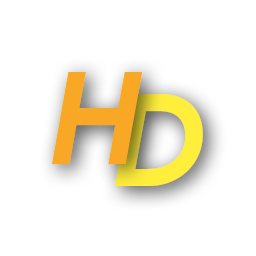
<style>
.page{position:relative;width:256px;height:256px;background:#ffffff}
.page>*{position:absolute;margin:0}
.t1{font:129.4px "ProductSans-BoldItalic";letter-spacing:-0.22em;color:#f9a825}
.t2{font:129.4px "ProductSans-BoldItalic";letter-spacing:-0.22em;color:#ffee3b}
</style>
<div class="page">
<p class="t1" style="left:52px;top:72px;width:91px;height:92px">H</p>
<p class="t2" style="left:115px;top:94px;width:88px;height:92px">D</p>
</div>
